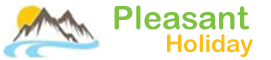
<style>
.page{position:relative;width:271px;height:60px;background:#ffffff}
.page>*{position:absolute;margin:0}
.t1{font:32.1px "ArialRoundedMTBold";color:#7fc142}
.t2{font:24.1px "ArialRoundedMTBold";color:#fcbe16}
</style>
<div class="page">
<p class="t1" style="left:114px;top:5px;width:135px;height:25px">Pleasant</p>
<p class="t2" style="left:167px;top:34px;width:86px;height:23px">Holiday</p>
</div>
